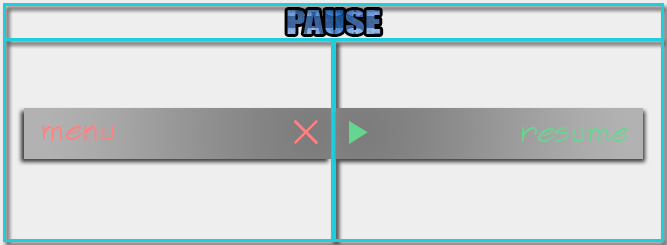
<style>
.page{position:relative;width:667px;height:245px;background:#eeeeee}
.page>*{position:absolute;margin:0}
.t1{font:30px "Impact";scale:1.28 1}
.t2{font:30px "SketchFlowPrint";color:#ff8080}
.t3{font:30px "SketchFlowPrint";color:#65d68f}
</style>
<div class="page">
<p class="t1" style="left:287px;top:10px;width:94px;height:24px">PAUSE</p>
<p class="t2" style="left:42px;top:125px;width:72px;height:16px">menu</p>
<p class="t3" style="left:521px;top:127px;width:107px;height:16px">resume</p>
</div>
